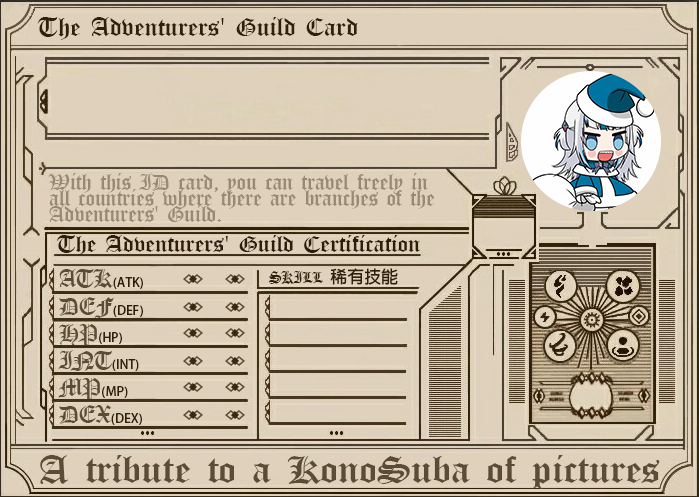
<style>
.page{position:relative;width:699px;height:497px;background:#e0d1bc}
.page>*{position:absolute;margin:0}
.t1{font:26.9px "Canterbury-Regular";color:#302008;scale:1.09 1}
.t2{font:24px/16px "Canterbury-Regular";color:#988974}
.t3{font:23.9px "Canterbury-Regular";color:#2e1e07;scale:1.13 1}
.t4{font:12px "AdobeFanHeitiStd-Bold";color:#2e1e06;scale:1.05 1}
.t5{font:25.7px "Canterbury-Regular";color:#5b4c35;scale:1.05 1}
.t6{font:17.2px "Canterbury-Regular";color:#2f2107}
.t7{font:17.2px "AdobeFanHeitiStd-Bold";color:#2f1f09}
.t8{font:12px "AdobeFanHeitiStd-Bold";color:#2d1d06;scale:1.05 1}
.t9{font:12px "AdobeFanHeitiStd-Bold";color:#301f0a;scale:1.05 1}
.t10{font:12px "AdobeFanHeitiStd-Bold";color:#312309;scale:1.05 1}
.t11{font:12px "AdobeFanHeitiStd-Bold";color:#30220c;scale:1.05 1}
.t12{font:12px "AdobeFanHeitiStd-Bold";color:#2f2107;scale:1.05 1}
.t13{font:39.8px "Canterbury-Regular";color:#5b4c35;scale:1.17 1}
</style>
<div class="page">
<p class="t1" style="left:37px;top:17px;width:321px;height:23px">The Adventurers' Guild Card</p>
<p class="t2" style="left:48px;top:173px;width:387px;height:49px">With this ID card, you can travel freely in all countries where there are branches of the Adventurers' Guild.</p>
<p class="t3" style="left:56px;top:235px;width:364px;height:20px">The Adventurers' Guild Certification</p>
<p class="t4" style="left:59px;top:269px;width:84px;height:20px"><span class="t5">ATK</span>(ATK)</p>
<p class="t6" style="left:269px;top:268px;width:129px;height:17px">SKILL  <span class="t7">稀有技能</span></p>
<p class="t8" style="left:59px;top:297px;width:84px;height:21px"><span class="t5">DEF</span>(DEF)</p>
<p class="t9" style="left:59px;top:324px;width:63px;height:21px"><span class="t5">HP</span>(HP)</p>
<p class="t10" style="left:58px;top:350px;width:81px;height:21px"><span class="t5">INT</span>(INT)</p>
<p class="t11" style="left:58px;top:378px;width:70px;height:21px"><span class="t5">MP</span>(MP)</p>
<p class="t12" style="left:59px;top:405px;width:83px;height:20px"><span class="t5">DEX</span>(DEX)</p>
<p class="t13" style="left:40px;top:455px;width:620px;height:34px">A tribute to a KonoSuba of pictures</p>
</div>
